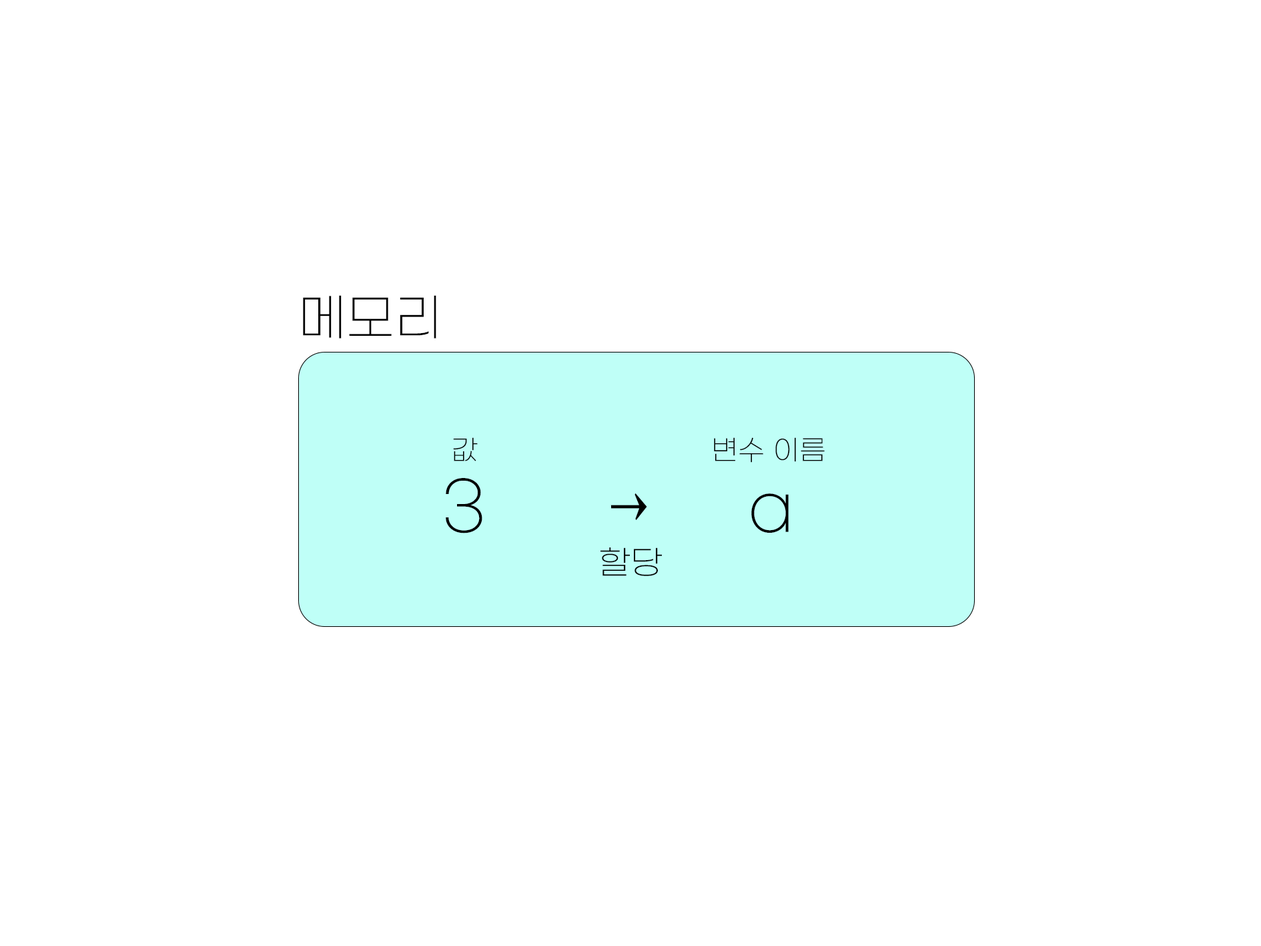
<style>
.page{position:relative;width:1261px;height:946px;background:#ffffff}
.page>*{position:absolute;margin:0}
.t1{font:50px "GmarketSansLight";color:#000000}
.t2{font:27.8px "GmarketSansLight";color:#000000}
.t3{font:33.4px "GmarketSansLight";color:#000000}
.t4{font:66.7px "GmarketSansLight";color:#000000}
.t5{font:73.8px "GmarketSansLight";color:#000000;scale:0.68 1}
.t6{font:33.1px "GmarketSansLight";color:#000000}
</style>
<div class="page">
<p class="t1" style="left:303px;top:295px;width:133px;height:43px">메모리</p>
<p class="t2" style="left:453px;top:437px;width:372px;height:25px"><span class="t3">        </span>값                              변수 이름</p>
<p class="t4" style="left:446px;top:478px;width:343px;height:55px">3              a</p>
<p class="t5" style="left:611px;top:493px;width:36px;height:27px">→</p>
<p class="t6" style="left:601px;top:547px;width:61px;height:29px">할당</p>
</div>
